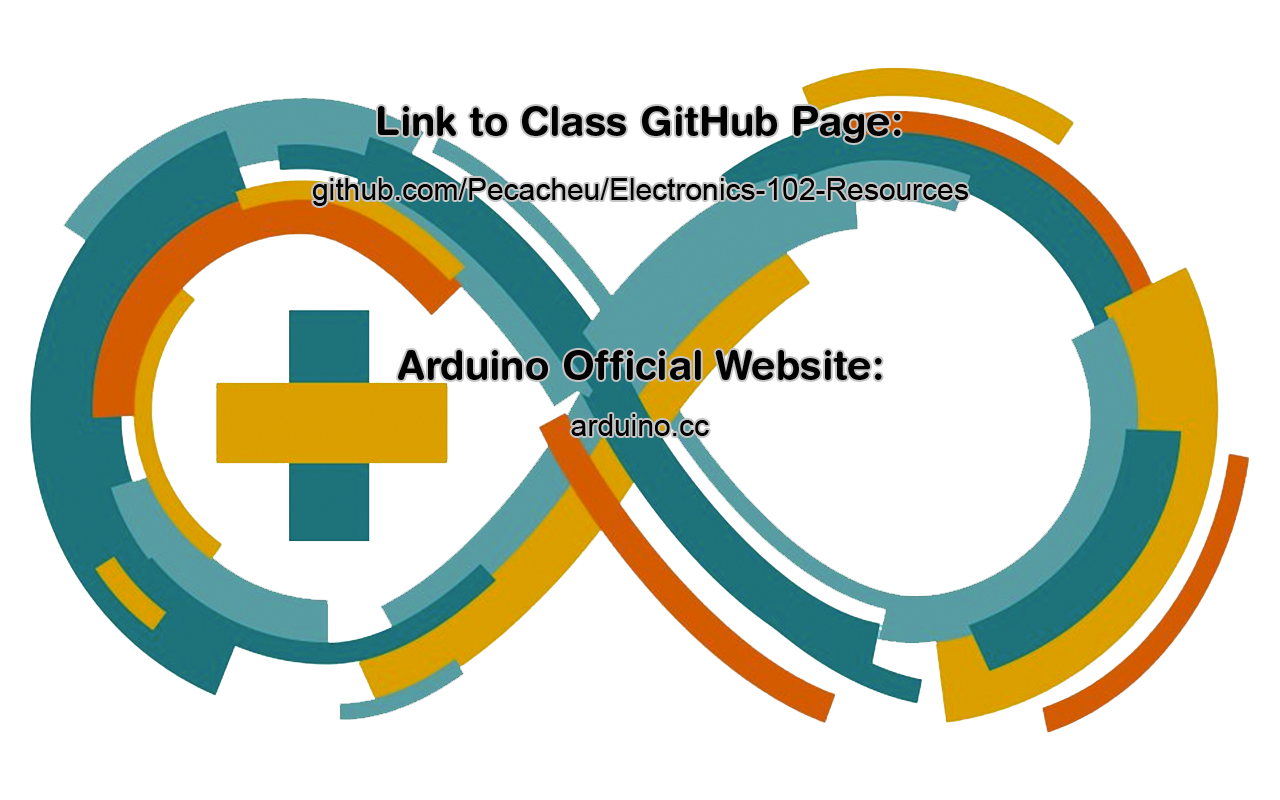
<style>
.page{position:relative;width:1280px;height:800px;background:#ffffff}
.page>*{position:absolute;margin:0}
.t1{font:40px "HelveticaRounded-Bold";color:#000000}
.t2{font:30px "ArialMT";color:#000000}
</style>
<div class="page">
<p class="t1" style="left:378px;top:106px;width:523px;height:37px">Link to Class GitHub Page:</p>
<p class="t2" style="left:313px;top:178px;width:655px;height:28px">github.com/Pecacheu/Electronics-102-Resources</p>
<p class="t1" style="left:398px;top:350px;width:484px;height:30px">Arduino Official Website:</p>
<p class="t2" style="left:571px;top:414px;width:138px;height:22px">arduino.cc</p>
</div>
